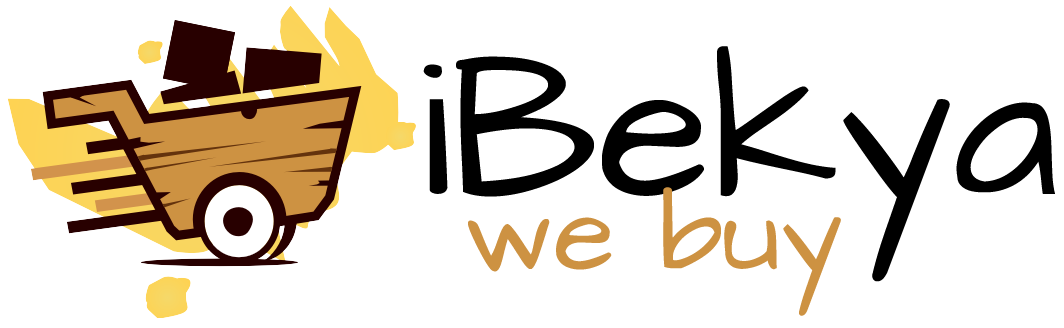
<style>
.page{position:relative;width:1064px;height:328px;background:#ffffff}
.page>*{position:absolute;margin:0}
.t1{font:208.3px "ArchitectsDaughter";color:#000000}
.t2{font:112.5px "ArchitectsDaughter";color:#cd9242}
</style>
<div class="page">
<p class="t1" style="left:423px;top:46px;width:632px;height:236px">iBekya</p>
<p class="t2" style="left:468px;top:187px;width:373px;height:129px">we buy</p>
</div>
